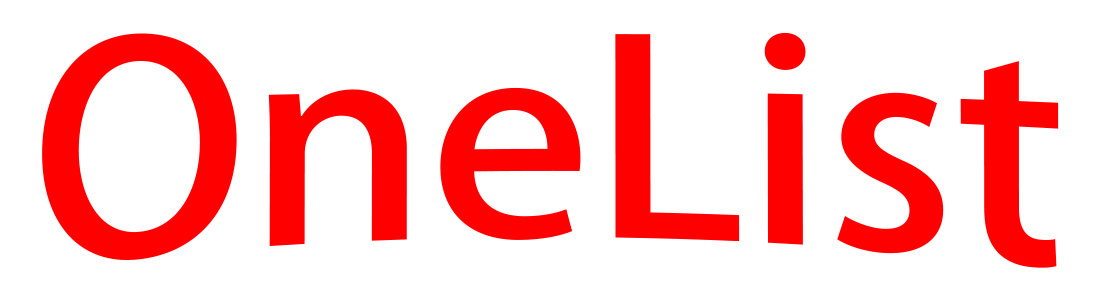
<style>
.page{position:relative;width:1100px;height:300px;background:#ffffff}
.page>*{position:absolute;margin:0}
.t1{font:300px "AdobeHeitiStd-Regular";color:#ff0000}
</style>
<div class="page">
<p class="t1" style="left:42px;top:32px;width:1017px;height:236px">OneList</p>
</div>
